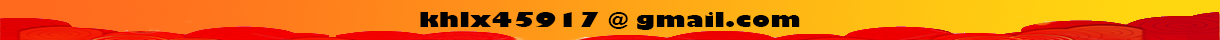
<style>
.page{position:relative;width:1220px;height:40px}
.page>*{position:absolute;margin:0}
.t1{font:20.4px "GillSans-UltraBold";color:#000000;scale:1.25 1}
</style>
<div class="page">
<p class="t1" style="left:420px;top:12px;width:380px;height:18px">khlx45917 @ gmail.com</p>
</div>
